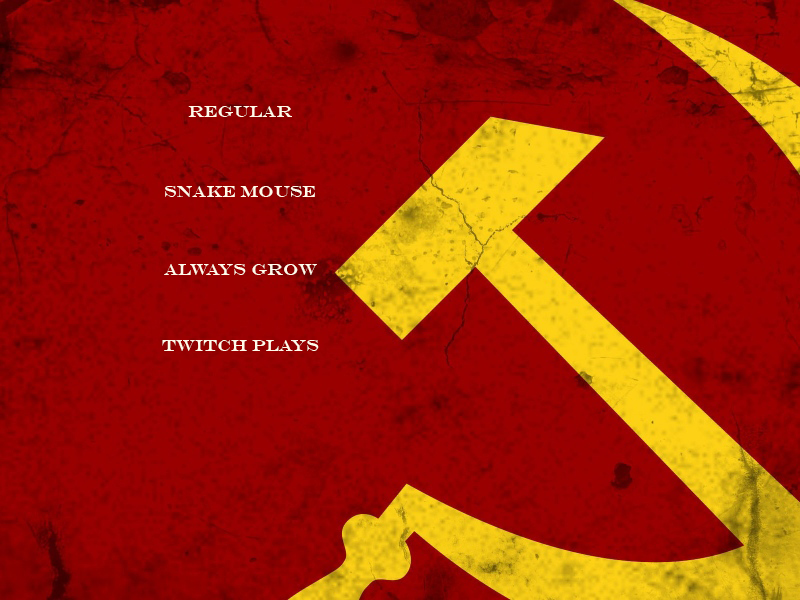
<style>
.page{position:relative;width:800px;height:600px}
.page>*{position:absolute;margin:0}
.t1{font:12px "EngraversMT";color:#fffaea}
</style>
<div class="page">
<p class="t1" style="left:188px;top:106px;width:104px;height:11px">Regular</p>
<p class="t1" style="left:165px;top:186px;width:150px;height:11px">Snake mouse</p>
<p class="t1" style="left:164px;top:264px;width:153px;height:11px">Always Grow</p>
<p class="t1" style="left:162px;top:340px;width:157px;height:11px">Twitch plays</p>
</div>
